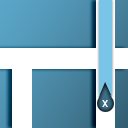
<style>
.page{position:relative;width:128px;height:128px;background:#ffffff}
.page>*{position:absolute;margin:0}
.t1{font:8.8px "Exo-DemiBold";color:#ffffff;scale:1.09 1}
</style>
<div class="page">
<p class="t1" style="left:102px;top:100px;width:6px;height:7px">X</p>
</div>
